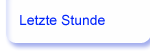
<style>
.page{position:relative;width:150px;height:54px;background:#fefefe}
.page>*{position:absolute;margin:0}
.t1{font:14px "ArialMT";color:#0326fb}
</style>
<div class="page">
<p class="t1" style="left:20px;top:14px;width:85px;height:12px">Letzte Stunde</p>
</div>
